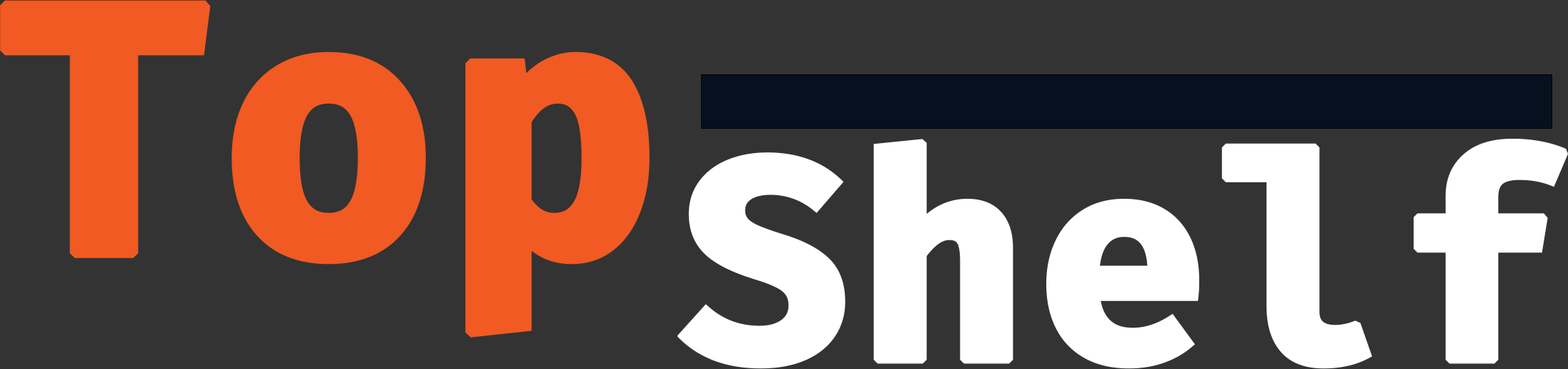
<style>
.page{position:relative;width:1568px;height:369px;background:#333333}
.page>*{position:absolute;margin:0}
.t1{font:357.3px "FiraMono-Bold";color:#f15a22;font-weight:bold}
.t2{font:285.9px "FiraMono-Bold";color:#ffffff;font-weight:bold}
</style>
<div class="page">
<p class="t1" style="left:0px;top:0px;width:650px;height:337px">Top</p>
<p class="t2" style="left:678px;top:139px;width:890px;height:230px">Shelf</p>
</div>
